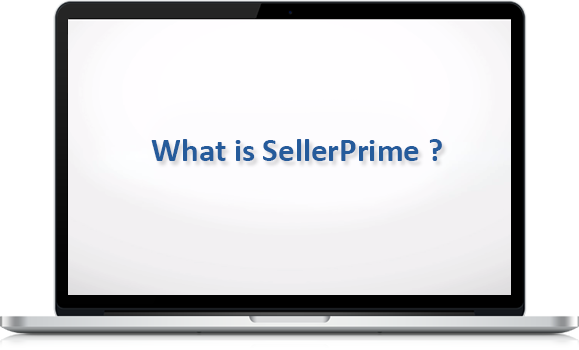
<style>
.page{position:relative;width:579px;height:350px}
.page>*{position:absolute;margin:0}
.t1{font:33px "Calibri-Bold";color:#255b9b}
</style>
<div class="page">
<p class="t1" style="left:151px;top:139px;width:291px;height:22px">What is SellerPrime ?</p>
</div>
